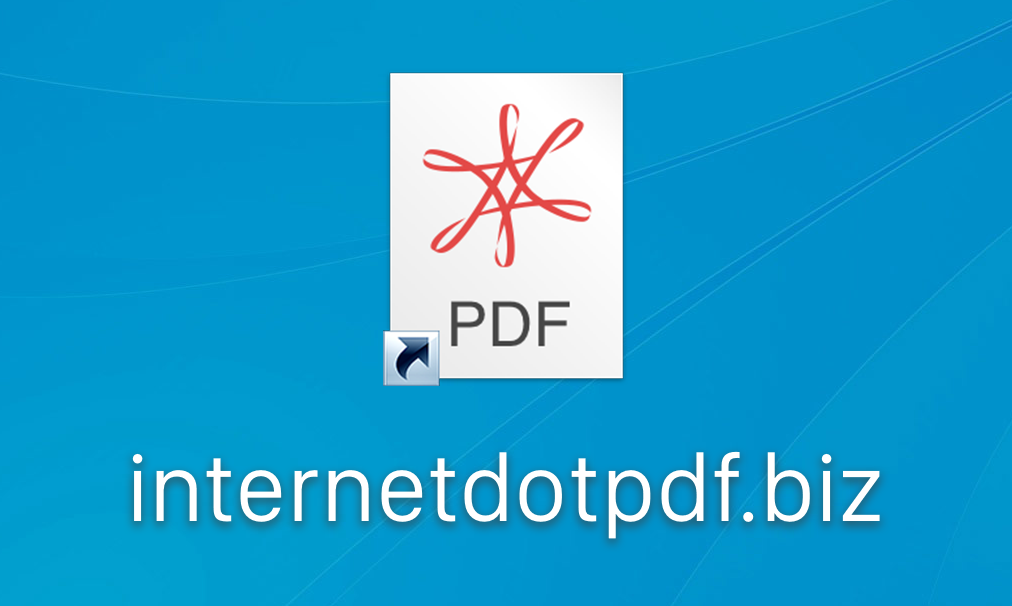
<style>
.page{position:relative;width:1012px;height:606px}
.page>*{position:absolute;margin:0}
.t1{font:98px "SanFranciscoDisplay-Regular";color:#ffffff}
</style>
<div class="page">
<p class="t1" style="left:132px;top:451px;width:748px;height:88px">internetdotpdf.biz</p>
</div>
